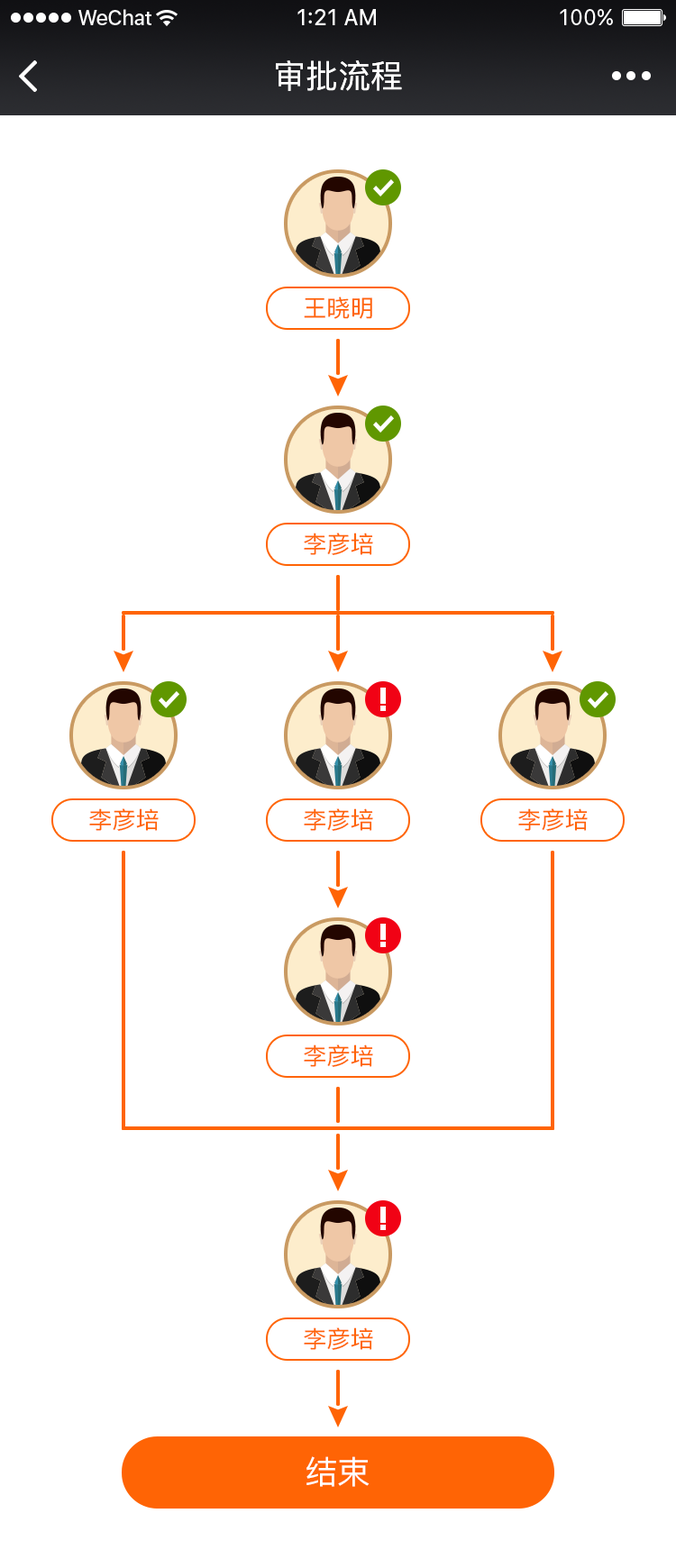
<style>
.page{position:relative;width:676px;height:1568px;background:#ffffff}
.page>*{position:absolute;margin:0}
.t1{font:32.4px "PingFang-SC-Medium";color:#ffffff}
.t2{font:23.4px "PingFang-SC-Medium";color:#ff6405}
</style>
<div class="page">
<p class="t1" style="left:276px;top:60px;width:126px;height:31px">审批流程</p>
<p class="t2" style="left:304px;top:296px;width:68px;height:23px">王晓明</p>
<p class="t2" style="left:304px;top:533px;width:69px;height:22px">李彦培</p>
<p class="t2" style="left:89px;top:808px;width:70px;height:23px">李彦培</p>
<p class="t2" style="left:304px;top:808px;width:69px;height:23px">李彦培</p>
<p class="t2" style="left:518px;top:808px;width:70px;height:23px">李彦培</p>
<p class="t2" style="left:304px;top:1044px;width:69px;height:23px">李彦培</p>
<p class="t2" style="left:304px;top:1327px;width:69px;height:23px">李彦培</p>
<p class="t1" style="left:306px;top:1456px;width:63px;height:31px">结束</p>
</div>
